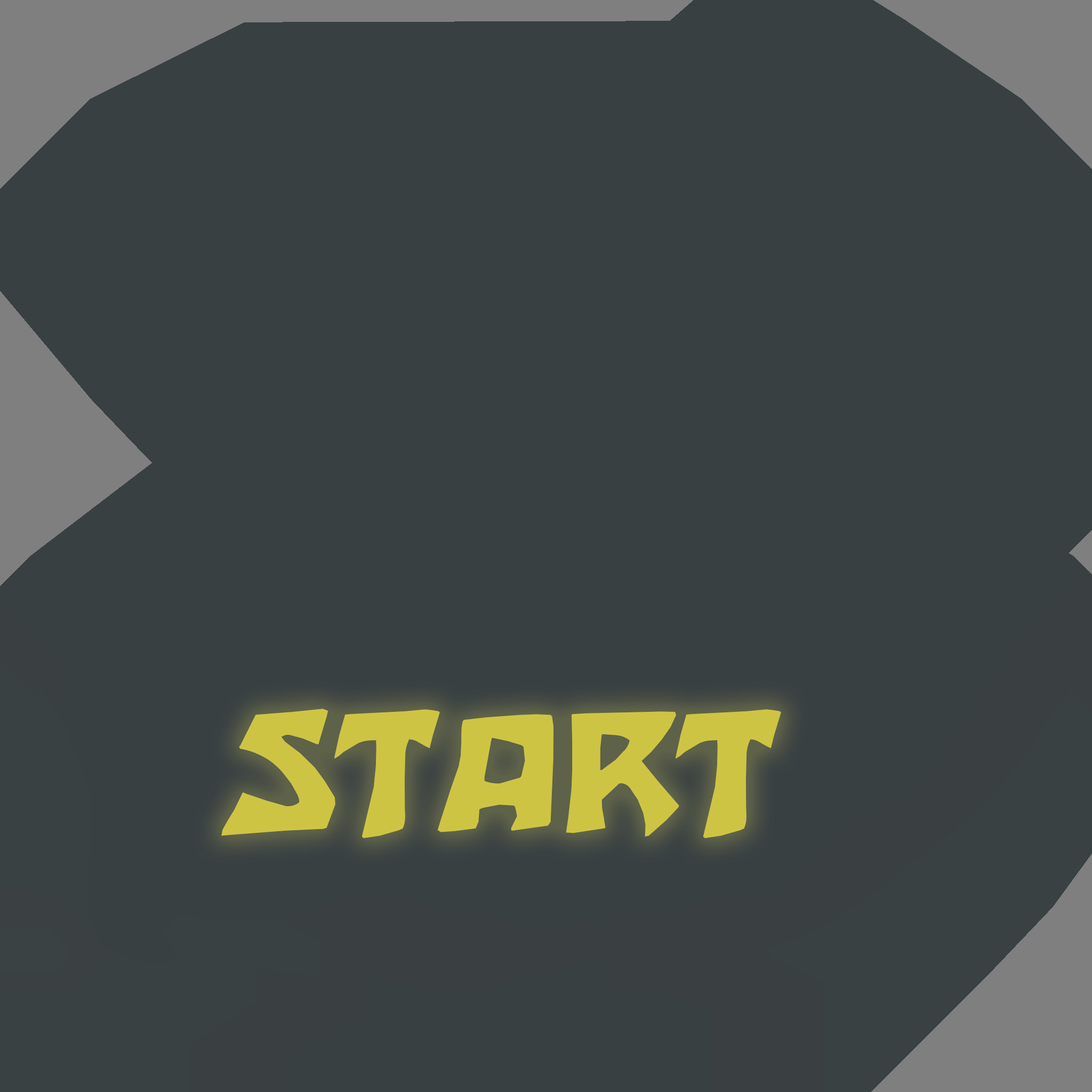
<style>
.page{position:relative;width:1092px;height:1092px;background:#394042}
.page>*{position:absolute;margin:0}
.t1{font:160px "Tarzan";color:#cec444}
</style>
<div class="page">
<p class="t1" style="left:221px;top:709px;width:560px;height:129px">START</p>
</div>
